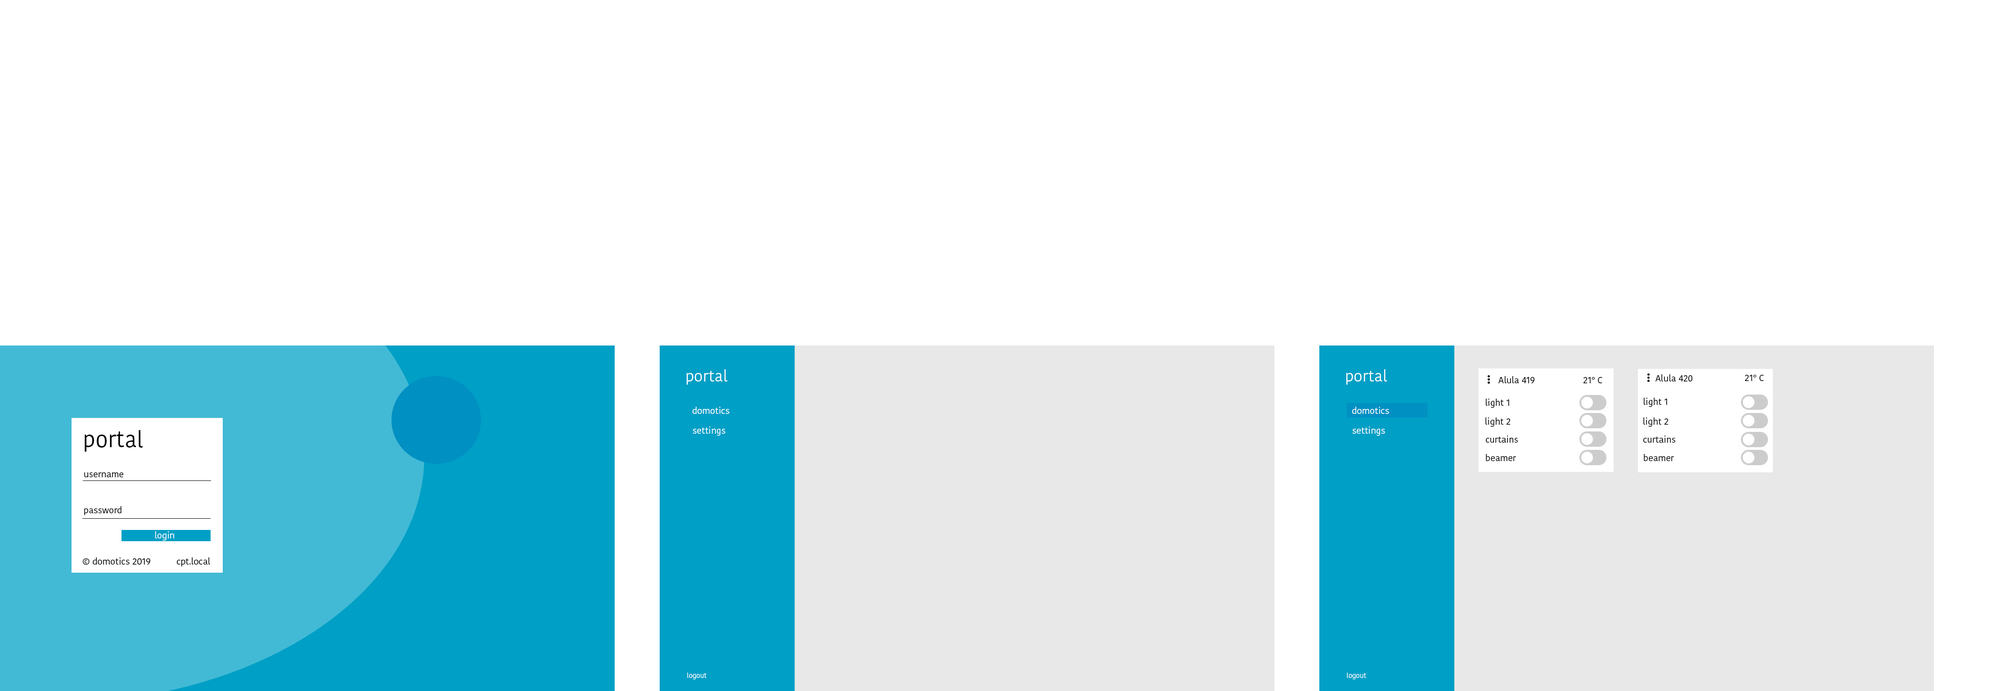
<style>
.page{position:relative;width:1997px;height:691px;background:#ffffff}
.page>*{position:absolute;margin:0}
.t1{font:15.8px "KohinoorBangla-Regular";color:#ffffff}
.t2{font:9px "KohinoorBangla-Regular";color:#000000}
.t3{font:9px "KohinoorBangla-Regular";color:#ffffff}
.t4{font:22.5px "KohinoorBangla-Regular";color:#000000}
.t5{font:6.8px "KohinoorBangla-Regular";color:#ffffff}
</style>
<div class="page">
<p class="t1" style="left:687px;top:369px;width:41px;height:16px">portal</p>
<p class="t1" style="left:1346px;top:369px;width:41px;height:16px">portal</p>
<p class="t2" style="left:1498px;top:376px;width:36px;height:7px">Alula 419</p>
<p class="t2" style="left:1583px;top:377px;width:19px;height:6px">21° C</p>
<p class="t2" style="left:1656px;top:374px;width:36px;height:8px">Alula 420</p>
<p class="t2" style="left:1745px;top:375px;width:19px;height:6px">21° C</p>
<p class="t2" style="left:1486px;top:399px;width:23px;height:9px">light 1</p>
<p class="t2" style="left:1644px;top:398px;width:23px;height:9px">light 1</p>
<p class="t3" style="left:693px;top:407px;width:36px;height:7px">domotics</p>
<p class="t3" style="left:1352px;top:407px;width:37px;height:7px">domotics</p>
<p class="t2" style="left:1485px;top:418px;width:26px;height:9px">light 2</p>
<p class="t2" style="left:1643px;top:418px;width:26px;height:9px">light 2</p>
<p class="t4" style="left:85px;top:430px;width:58px;height:22px">portal</p>
<p class="t3" style="left:693px;top:427px;width:32px;height:9px">settings</p>
<p class="t3" style="left:1352px;top:427px;width:33px;height:9px">settings</p>
<p class="t2" style="left:1486px;top:436px;width:32px;height:7px">curtains</p>
<p class="t2" style="left:1643px;top:436px;width:32px;height:7px">curtains</p>
<p class="t2" style="left:1486px;top:454px;width:30px;height:7px">beamer</p>
<p class="t2" style="left:1644px;top:454px;width:30px;height:7px">beamer</p>
<p class="t2" style="left:84px;top:472px;width:39px;height:5px">username</p>
<p class="t2" style="left:84px;top:506px;width:38px;height:9px">password</p>
<p class="t3" style="left:155px;top:531px;width:19px;height:10px">login</p>
<p class="t2" style="left:83px;top:558px;width:67px;height:7px">© domotics 2019</p>
<p class="t2" style="left:177px;top:558px;width:33px;height:9px">cpt.local</p>
<p class="t5" style="left:687px;top:673px;width:19px;height:7px">logout</p>
<p class="t5" style="left:1347px;top:673px;width:19px;height:7px">logout</p>
</div>
